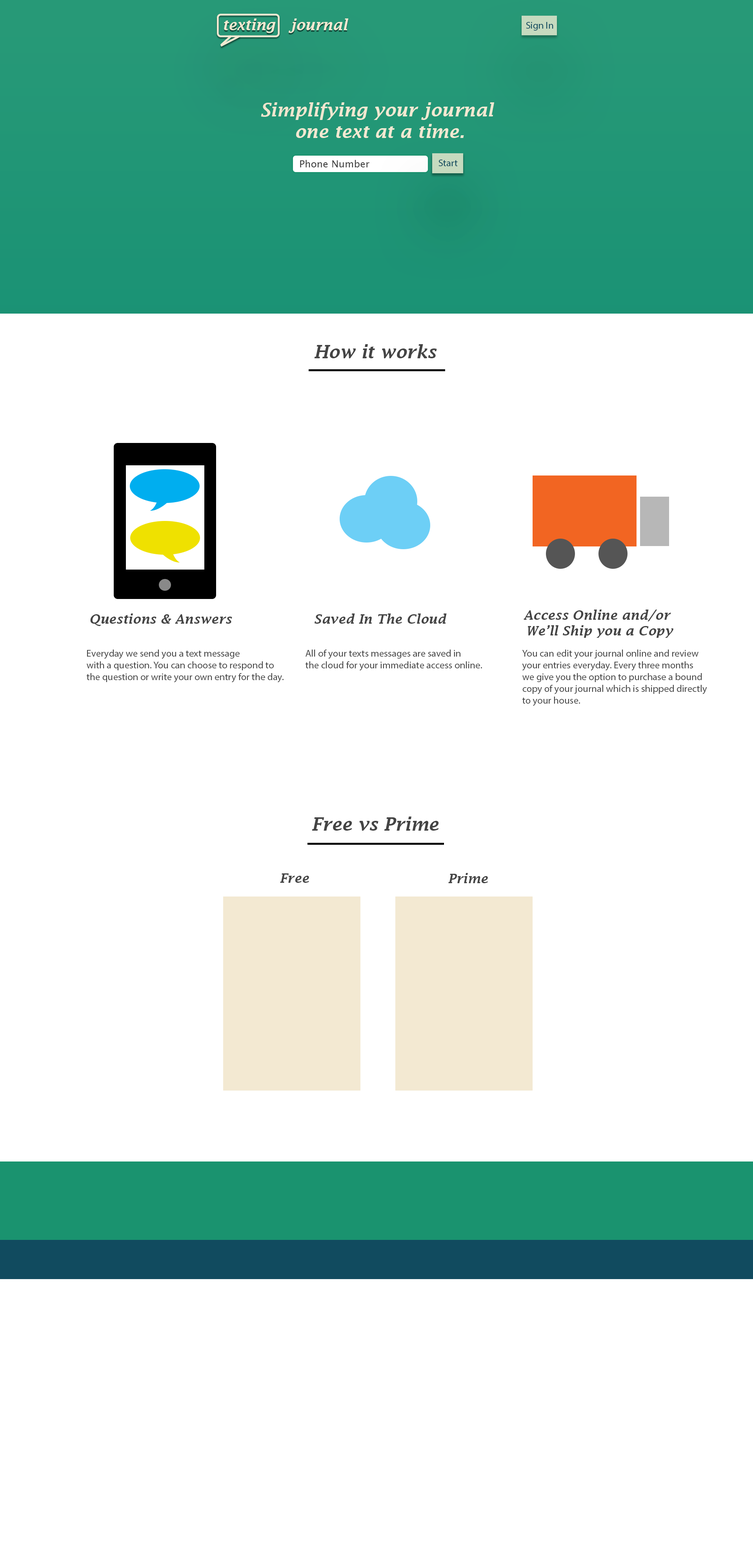
<style>
.page{position:relative;width:753px;height:1568px;background:#ffffff}
.page>*{position:absolute;margin:0}
.t1{font:14.7px "LucidaFax-DemiItalic";color:#f3e9d2}
.t2{font:9.8px "MyriadPro-Regular";color:#114b5f}
.t3{font:18px "LucidaFax-DemiItalic";color:#f3e9d2}
.t4{font:9.8px "LucidaSansUnicode";color:#3e3e3e}
.t5{font:18px "LucidaFax-DemiItalic";color:#444444}
.t6{font:13.1px "LucidaFax-DemiItalic";color:#444444}
.t7{font:9.8px "MyriadPro-Regular";color:#444444}
</style>
<div class="page">
<p class="t1" style="left:224px;top:18px;width:124px;height:15px">texting   journal</p>
<p class="t2" style="left:526px;top:22px;width:27px;height:9px">Sign In</p>
<p class="t3" style="left:261px;top:102px;width:233px;height:36px;text-align:center">Simplifying your journal <br>one text at a time.</p>
<p class="t4" style="left:300px;top:160px;width:69px;height:7px">Phone Number</p>
<p class="t2" style="left:438px;top:160px;width:19px;height:6px">Start</p>
<p class="t5" style="left:314px;top:344px;width:123px;height:14px">How it works</p>
<p class="t6" style="left:90px;top:613px;width:142px;height:13px">Questions &amp; Answers</p>
<p class="t6" style="left:314px;top:613px;width:132px;height:11px">Saved In The Cloud</p>
<p class="t6" style="left:523px;top:610px;width:150px;height:28px;text-align:center">Access Online and/or <br>We’ll Ship you a Copy</p>
<p class="t7" style="left:87px;top:650px;width:196px;height:32px">Everyday we send you a text message <br>with a question. You can choose to respond to <br>the question or write your own entry for the day.</p>
<p class="t7" style="left:305px;top:650px;width:177px;height:21px">All of your texts messages are saved in <br>the cloud for your immediate access online.</p>
<p class="t7" style="left:522px;top:650px;width:185px;height:56px">You can edit your journal online and review <br>your entries everyday. Every three months  <br>we give you the option to purchase a bound<br>copy of your journal which is shipped directly<br>to your house.</p>
<p class="t5" style="left:312px;top:817px;width:127px;height:14px">Free vs Prime</p>
<p class="t6" style="left:280px;top:873px;width:29px;height:10px">Free</p>
<p class="t6" style="left:448px;top:873px;width:40px;height:10px">Prime</p>
</div>
